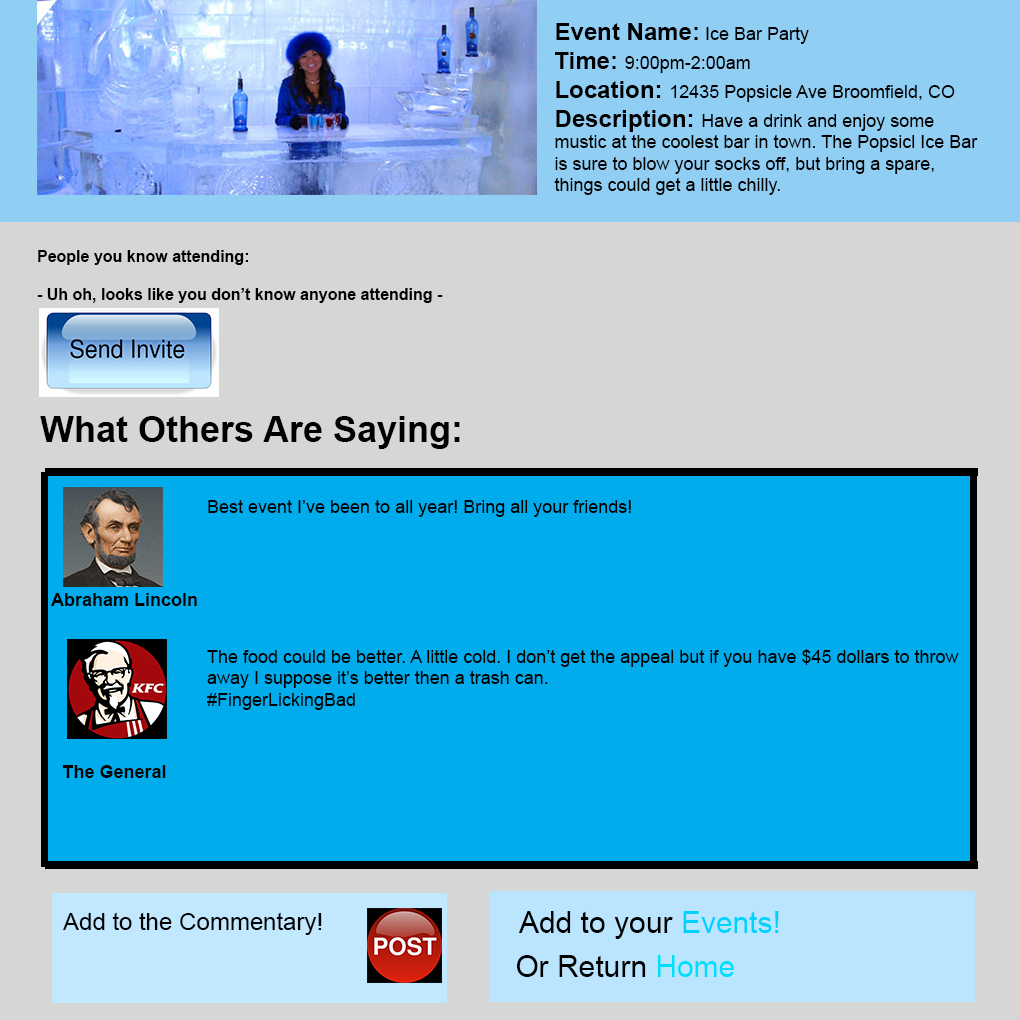
<style>
.page{position:relative;width:1020px;height:1020px;background:#00acec}
.page>*{position:absolute;margin:0}
.t1{font:18px "ArialMT";color:#000000}
.t2{font:24px "Arial-BoldMT";color:#000000}
.t3{font:16px "Arial-BoldMT";color:#000000}
.t4{font:36px "Arial-BoldMT";color:#000000}
.t5{font:18px "Arial-BoldMT";color:#000000}
.t6{font:24px "ArialMT";color:#000000}
.t7{font:30px "ArialMT";color:#000000}
.t8{font:30px "ArialMT";color:#00d2ff}
.t9{font:30px "ArialMT";color:#00deff}
</style>
<div class="page">
<p class="t1" style="left:554px;top:23px;width:424px;height:172px"><span class="t2">Event Name: </span>Ice Bar Party<br><span class="t2">Time: </span>9:00pm-2:00am<br><span class="t2">Location: </span>12435 Popsicle Ave Broomfield, CO <br><span class="t2">Description: </span>Have a drink and enjoy some mustic at the coolest bar in town. The Popsicl Ice Bar is sure to blow your socks off, but bring a spare, things could get a little chilly.</p>
<p class="t3" style="left:37px;top:250px;width:406px;height:53px">People you know attending:<br><br>- Uh oh, looks like you don’t know anyone attending -</p>
<p class="t4" style="left:40px;top:416px;width:420px;height:33px">What Others Are Saying:</p>
<p class="t1" style="left:208px;top:500px;width:423px;height:17px">Best event I’ve been to all year! Bring all your friends!</p>
<p class="t5" style="left:51px;top:593px;width:146px;height:13px">Abraham Lincoln</p>
<p class="t1" style="left:207px;top:649px;width:752px;height:61px">The food could be better. A little cold. I don’t get the appeal but if you have $45 dollars to throw away I suppose it’s better then a trash can. <br>#FingerLickingBad</p>
<p class="t5" style="left:62px;top:765px;width:104px;height:13px">The General</p>
<p class="t6" style="left:63px;top:912px;width:259px;height:23px">Add to the Commentary!</p>
<p class="t7" style="left:518px;top:911px;width:261px;height:28px">Add to your <span class="t8">Events!</span></p>
<p class="t7" style="left:517px;top:955px;width:217px;height:22px">Or Return <span class="t9">Home</span></p>
</div>
